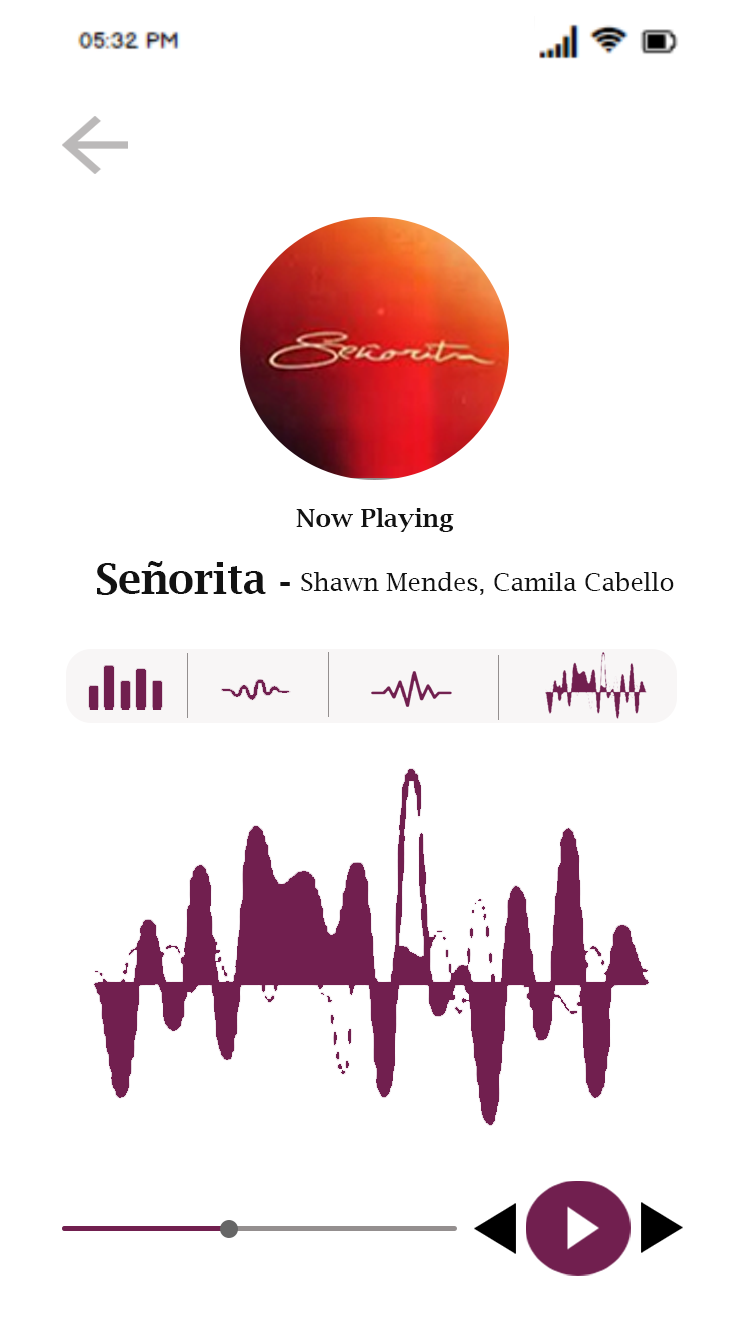
<style>
.page{position:relative;width:750px;height:1334px;background:#ffffff}
.page>*{position:absolute;margin:0}
.t1{font:25px "LucidaBright-Demi";color:#121212}
.t2{font:41.7px "LucidaBright-Demi";color:#121212}
.t3{font:25px "LucidaBright";color:#121212}
</style>
<div class="page">
<p class="t1" style="left:296px;top:508px;width:158px;height:24px">Now Playing</p>
<p class="t2" style="left:97px;top:561px;width:169px;height:34px">Señorita</p>
<p class="t2" style="left:280px;top:582px;width:10px;height:4px">-</p>
<p class="t3" style="left:301px;top:572px;width:373px;height:23px">Shawn Mendes, Camila Cabello</p>
</div>
